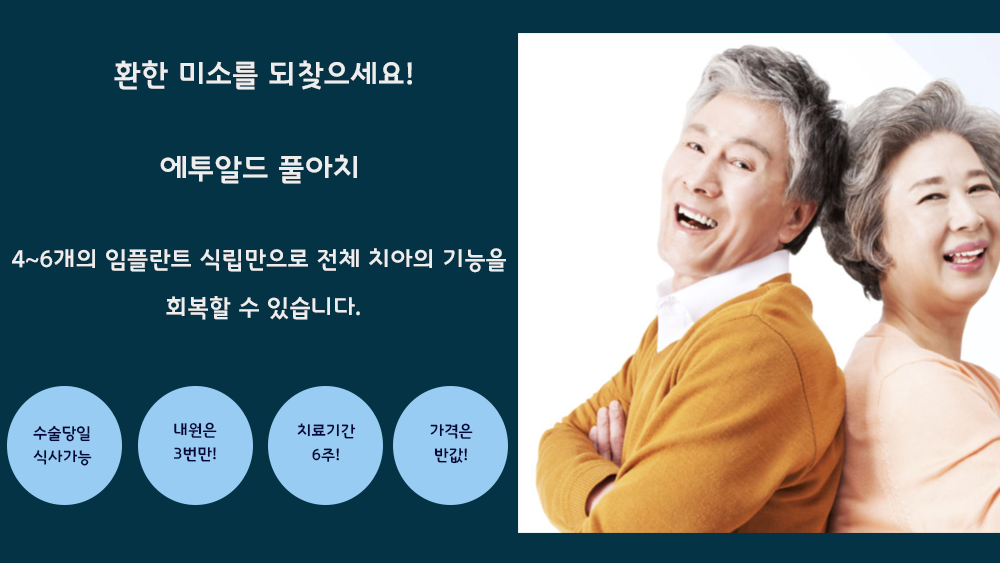
<style>
.page{position:relative;width:1000px;height:563px;background:#043346}
.page>*{position:absolute;margin:0}
.t1{font:30px "InterGTB";color:#ededed}
.t2{font:24px/48px "InterGTB";color:#ededed}
.t3{font:16px/24px "InterGTB";color:#05063a}
</style>
<div class="page">
<p class="t1" style="left:114px;top:60px;width:298px;height:30px">환한 미소를 되찾으세요!</p>
<p class="t1" style="left:160px;top:154px;width:197px;height:30px">에투알드 풀아치</p>
<p class="t2" style="left:12px;top:248px;width:494px;height:72px;text-align:center">4~6개의 임플란트 식립만으로 전체 치아의 기능을 <br>회복할 수 있습니다.</p>
<p class="t3" style="left:33px;top:425px;width:59px;height:41px">수술당일<br>식사가능</p>
<p class="t3" style="left:174px;top:422px;width:43px;height:40px">내원은<br>3번만!</p>
<p class="t3" style="left:297px;top:423px;width:59px;height:39px;text-align:center">치료기간<br>6주!</p>
<p class="t3" style="left:430px;top:423px;width:43px;height:41px;text-align:center">가격은<br>반값!</p>
</div>
